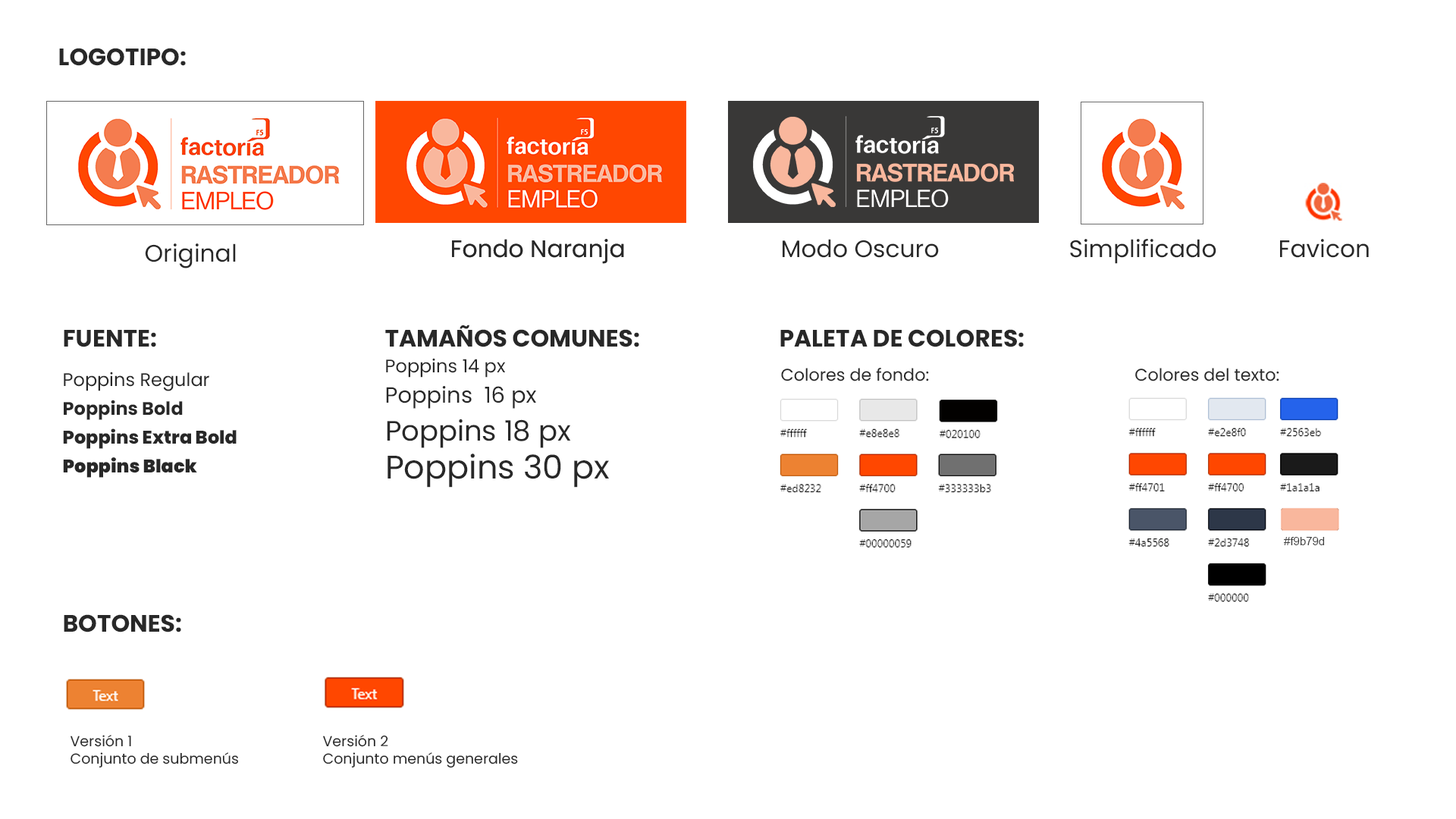
<style>
.page{position:relative;width:1456px;height:819px;background:#ffffff}
.page>*{position:absolute;margin:0}
.t1{font:23.8px "Poppins-Bold";color:#282828}
.t2{font:23.8px "Poppins-Regular";color:#282828}
.t3{font:22px/30.3px "Poppins-Regular";color:#282828}
.t4{font:18.2px/30.3px "Poppins-Regular";color:#282828}
.t5{font:28.1px/37.9px "Poppins-Regular";color:#282828}
.t6{font:32.6px/37.9px "Poppins-Regular";color:#282828}
.t7{font:18.2px/28.8px "Poppins-ExtraBold";color:#282828}
.t8{font:18.2px/28.8px "Poppins-Regular";color:#282828}
.t9{font:18.2px/28.8px "Poppins-Bold";color:#282828}
.t10{font:18.2px/28.8px "Poppins-Black";color:#282828}
.t11{font:16.9px "Poppins-Regular";color:#282828}
.t12{font:11.3px "ArialMT";color:#424242}
.t13{font:14.4px "Poppins-Regular";color:#282828}
</style>
<div class="page">
<p class="t1" style="left:59px;top:48px;width:127px;height:18px">LOGOTIPO:</p>
<p class="t2" style="left:145px;top:243px;width:91px;height:25px">Original</p>
<p class="t2" style="left:452px;top:239px;width:172px;height:25px">Fondo Naranja</p>
<p class="t2" style="left:452px;top:239px;width:172px;height:25px">Fondo Naranja</p>
<p class="t2" style="left:783px;top:239px;width:156px;height:19px">Modo Oscuro</p>
<p class="t2" style="left:1070px;top:239px;width:146px;height:25px">Simplificado</p>
<p class="t2" style="left:1280px;top:239px;width:89px;height:19px">Favicon</p>
<p class="t1" style="left:64px;top:330px;width:92px;height:17px">FUENTE:</p>
<p class="t1" style="left:385px;top:325px;width:254px;height:22px">TAMAÑOS COMUNES:</p>
<p class="t1" style="left:780px;top:329px;width:244px;height:18px">PALETA DE COLORES:</p>
<p class="t3" style="left:386px;top:358px;width:223px;height:130px"><span class="t4">Poppins 14 px<br></span>Poppins  16 px<br><span class="t5">Poppins 18 px<br></span><span class="t6">Poppins 30 px</span></p>
<p class="t7" style="left:63px;top:372px;width:174px;height:106px"><span class="t8">Poppins Regular<br></span><span class="t9">Poppins Bold<br></span>Poppins Extra Bold<br><span class="t10">Poppins Black</span></p>
<p class="t11" style="left:781px;top:368px;width:148px;height:13px">Colores de fondo:</p>
<p class="t11" style="left:1135px;top:368px;width:144px;height:13px">Colores del texto:</p>
<p class="t12" style="left:1284px;top:537px;width:41px;height:8px">#f9b79d</p>
<p class="t1" style="left:64px;top:614px;width:117px;height:18px">BOTONES:</p>
<p class="t13" style="left:71px;top:735px;width:167px;height:33px">Versión 1<br>Conjunto de submenús</p>
<p class="t13" style="left:323px;top:735px;width:195px;height:33px">Versión 2<br>Conjunto menús generales</p>
</div>
